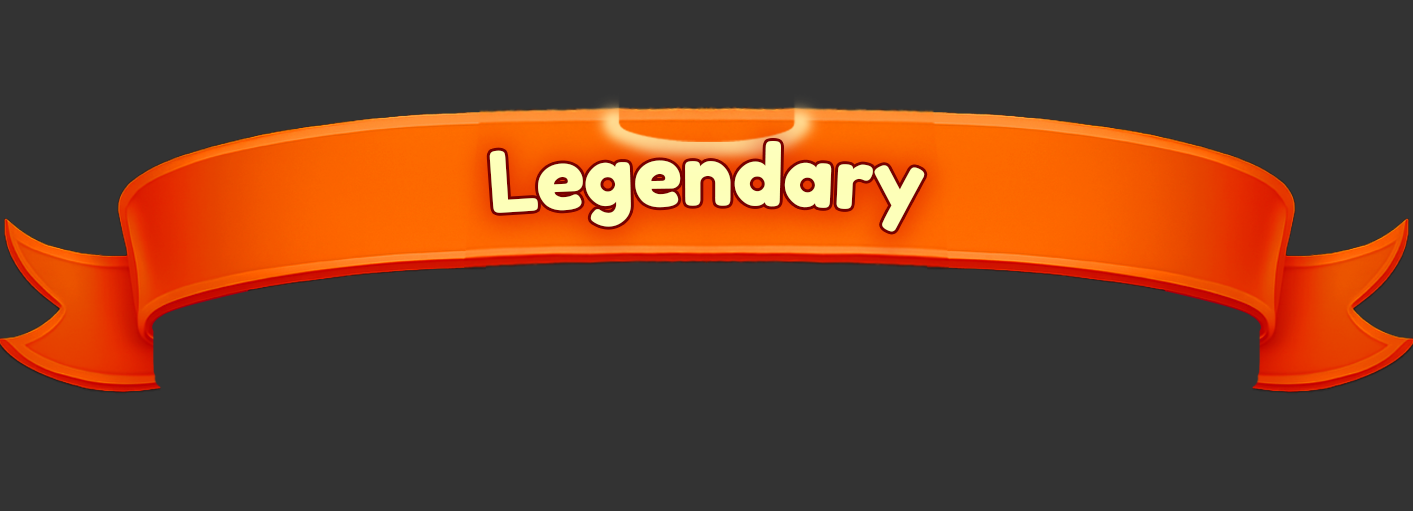
<style>
.page{position:relative;width:1413px;height:511px;background:#333333}
.page>*{position:absolute;margin:0}
.t1{font:84.6px "FredokaOne-Regular";letter-spacing:-0.01em;color:#fdffb9}
</style>
<div class="page">
<p class="t1" style="left:489px;top:141px;width:436px;height:91px">Legendary</p>
</div>
